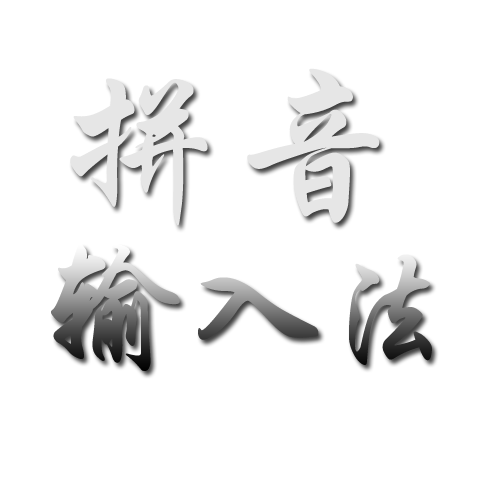
<style>
.page{position:relative;width:480px;height:480px;background:#ffffff}
.page>*{position:absolute;margin:0}
.t1{font:140px "STXingkai"}
</style>
<div class="page">
<p class="t1" style="left:51px;top:244px;width:381px;height:127px">输入法</p>
</div>
